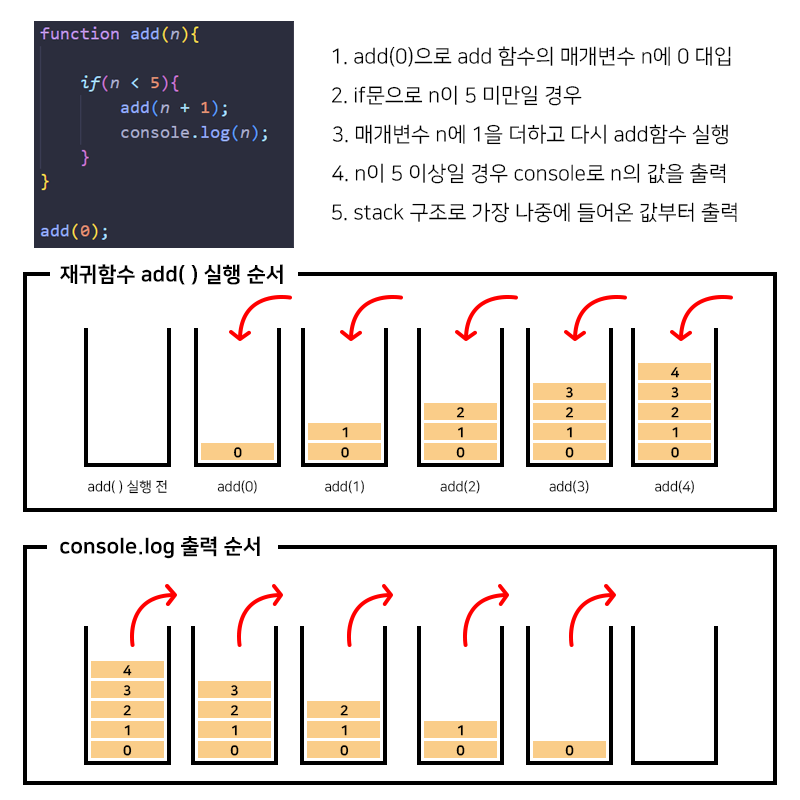
<style>
.page{position:relative;width:800px;height:800px;background:#ffffff}
.page>*{position:absolute;margin:0}
.t1{font:20.8px "NanumSquareR";color:#000000}
.t2{font:20.8px "NanumSquareEB";color:#000000}
.t3{font:13.9px "NanumSquareEB";color:#000000}
.t4{font:13.9px "NanumSquareR";color:#000000}
</style>
<div class="page">
<p class="t1" style="left:332px;top:46px;width:399px;height:21px">1. add(0)으로 add 함수의 매개변수 n에 0 대입</p>
<p class="t1" style="left:332px;top:85px;width:250px;height:21px">2. if문으로 n이 5 미만일 경우</p>
<p class="t1" style="left:332px;top:124px;width:396px;height:21px">3. 매개변수 n에 1을 더하고 다시 add함수 실행</p>
<p class="t1" style="left:332px;top:163px;width:394px;height:21px">4. n이 5 이상일 경우 console로 n의 값을 출력</p>
<p class="t1" style="left:332px;top:202px;width:405px;height:21px">5. stack 구조로 가장 나중에 들어온 값부터 출력</p>
<p class="t2" style="left:60px;top:264px;width:223px;height:21px">재귀함수 add( ) 실행 순서</p>
<p class="t3" style="left:670px;top:367px;width:10px;height:11px">4</p>
<p class="t3" style="left:566px;top:387px;width:7px;height:11px">3</p>
<p class="t3" style="left:671px;top:387px;width:8px;height:11px">3</p>
<p class="t3" style="left:456px;top:407px;width:9px;height:11px">2</p>
<p class="t3" style="left:565px;top:407px;width:9px;height:11px">2</p>
<p class="t3" style="left:671px;top:407px;width:8px;height:11px">2</p>
<p class="t3" style="left:342px;top:427px;width:6px;height:11px">1</p>
<p class="t3" style="left:458px;top:427px;width:5px;height:11px">1</p>
<p class="t3" style="left:567px;top:427px;width:5px;height:11px">1</p>
<p class="t3" style="left:672px;top:427px;width:6px;height:11px">1</p>
<p class="t3" style="left:233px;top:447px;width:9px;height:11px">0</p>
<p class="t3" style="left:341px;top:447px;width:8px;height:11px">0</p>
<p class="t3" style="left:456px;top:447px;width:9px;height:11px">0</p>
<p class="t3" style="left:565px;top:447px;width:9px;height:11px">0</p>
<p class="t3" style="left:671px;top:447px;width:8px;height:11px">0</p>
<p class="t4" style="left:88px;top:480px;width:79px;height:14px">add( ) 실행 전</p>
<p class="t4" style="left:217px;top:480px;width:40px;height:14px">add(0)</p>
<p class="t4" style="left:325px;top:480px;width:39px;height:14px">add(1)</p>
<p class="t4" style="left:440px;top:480px;width:40px;height:14px">add(2)</p>
<p class="t4" style="left:549px;top:480px;width:40px;height:14px">add(3)</p>
<p class="t4" style="left:655px;top:480px;width:39px;height:14px">add(4)</p>
<p class="t2" style="left:60px;top:536px;width:200px;height:23px">console.log 출력 순서</p>
<p class="t3" style="left:123px;top:665px;width:9px;height:11px">4</p>
<p class="t3" style="left:123px;top:685px;width:8px;height:11px">3</p>
<p class="t3" style="left:231px;top:685px;width:7px;height:11px">3</p>
<p class="t3" style="left:123px;top:705px;width:8px;height:11px">2</p>
<p class="t3" style="left:230px;top:705px;width:9px;height:11px">2</p>
<p class="t3" style="left:340px;top:705px;width:8px;height:11px">2</p>
<p class="t3" style="left:124px;top:725px;width:6px;height:11px">1</p>
<p class="t3" style="left:232px;top:725px;width:5px;height:11px">1</p>
<p class="t3" style="left:341px;top:725px;width:6px;height:11px">1</p>
<p class="t3" style="left:458px;top:725px;width:5px;height:11px">1</p>
<p class="t3" style="left:123px;top:745px;width:9px;height:11px">0</p>
<p class="t3" style="left:230px;top:745px;width:9px;height:11px">0</p>
<p class="t3" style="left:340px;top:745px;width:9px;height:11px">0</p>
<p class="t3" style="left:456px;top:745px;width:9px;height:11px">0</p>
<p class="t3" style="left:565px;top:745px;width:9px;height:11px">0</p>
</div>
